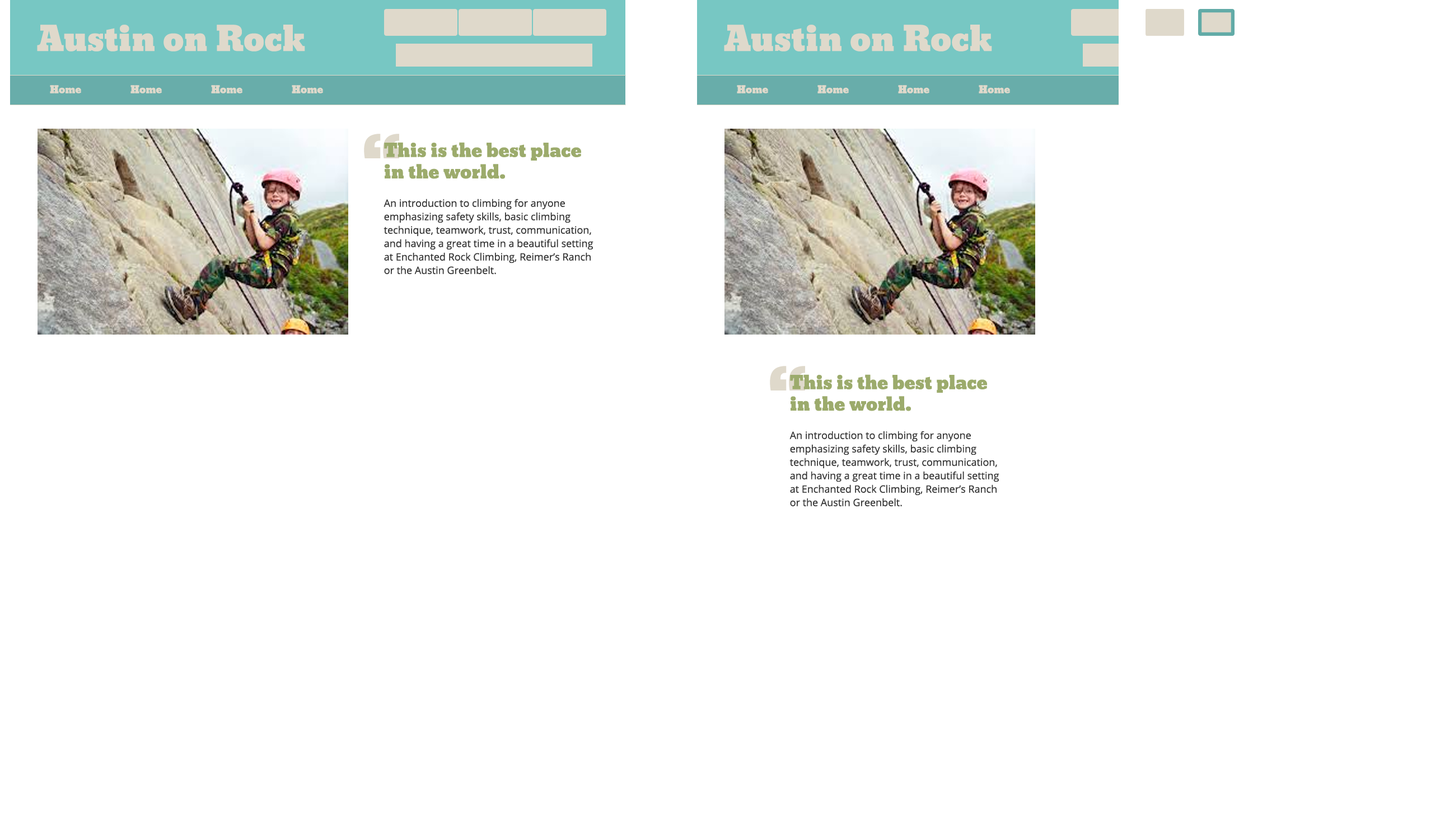
<style>
.page{position:relative;width:1440px;height:828px;background:#ffffff}
.page>*{position:absolute;margin:0}
.t1{font:33px "Bevan";color:#dfd9cb}
.t2{font:10.1px "Bevan";color:#dfd9cb}
.t3{font:61.6px "Bevan";color:#dfd9cb}
.t4{font:17.9px "Bevan";color:#9cab6c}
.t5{font:10.1px/13.4px "OpenSans";color:#363636}
</style>
<div class="page">
<p class="t1" style="left:37px;top:25px;width:268px;height:26px">Austin on Rock</p>
<p class="t1" style="left:724px;top:25px;width:268px;height:26px">Austin on Rock</p>
<p class="t2" style="left:50px;top:85px;width:31px;height:8px">Home</p>
<p class="t2" style="left:130px;top:85px;width:32px;height:8px">Home</p>
<p class="t2" style="left:211px;top:85px;width:31px;height:8px">Home</p>
<p class="t2" style="left:292px;top:85px;width:31px;height:8px">Home</p>
<p class="t2" style="left:737px;top:85px;width:31px;height:8px">Home</p>
<p class="t2" style="left:817px;top:85px;width:31px;height:8px">Home</p>
<p class="t2" style="left:898px;top:85px;width:31px;height:8px">Home</p>
<p class="t2" style="left:978px;top:85px;width:32px;height:8px">Home</p>
<p class="t3" style="left:364px;top:134px;width:35px;height:24px">“</p>
<p class="t4" style="left:384px;top:142px;width:197px;height:37px">This is the best place in the world.</p>
<p class="t5" style="left:383px;top:199px;width:210px;height:75px">An introduction to climbing for anyone emphasizing safety skills, basic climbing technique, teamwork, trust, communication, and having a great time in a beautiful setting at Enchanted Rock Climbing, Reimer’s Ranch or the Austin Greenbelt.</p>
<p class="t3" style="left:770px;top:366px;width:35px;height:25px">“</p>
<p class="t4" style="left:790px;top:374px;width:197px;height:37px">This is the best place in the world.</p>
<p class="t5" style="left:789px;top:431px;width:210px;height:76px">An introduction to climbing for anyone emphasizing safety skills, basic climbing technique, teamwork, trust, communication, and having a great time in a beautiful setting at Enchanted Rock Climbing, Reimer’s Ranch or the Austin Greenbelt.</p>
</div>
